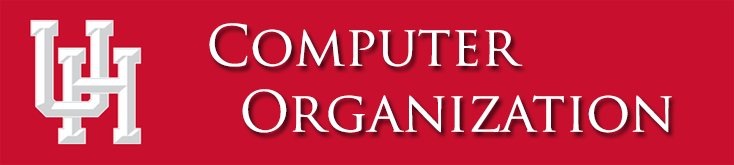
<style>
.page{position:relative;width:734px;height:165px;background:#c8102e}
.page>*{position:absolute;margin:0}
.t1{font:55px "TrajanPro-Regular";color:#ffffff}
</style>
<div class="page">
<p class="t1" style="left:209px;top:23px;width:463px;height:110px">Computer <br> Organization</p>
</div>
